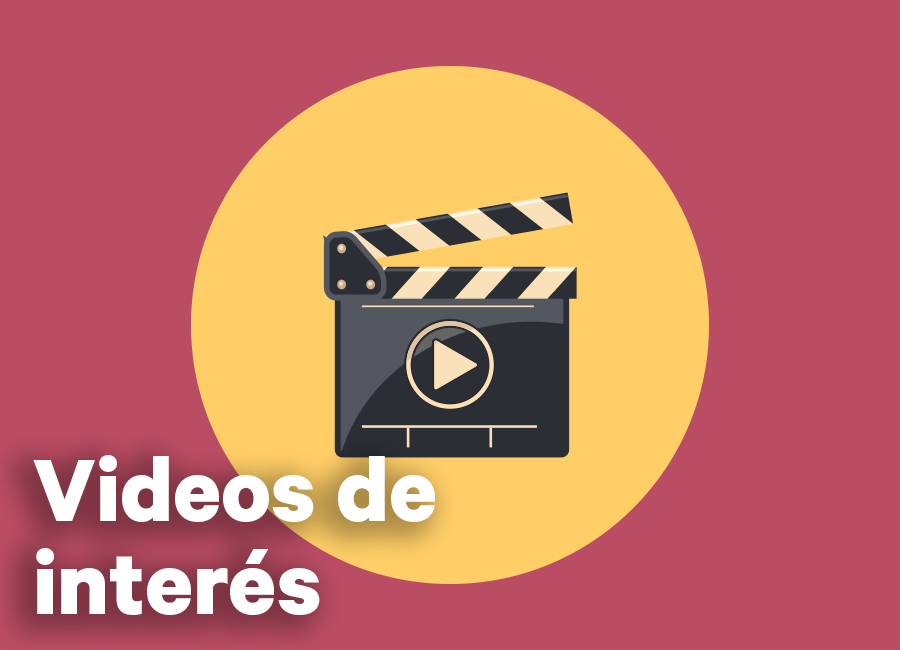
<style>
.page{position:relative;width:900px;height:650px;background:#ba4c63}
.page>*{position:absolute;margin:0}
.t1{font:100px/93px "Calibre-Bold";color:#ffffff}
</style>
<div class="page">
<p class="t1" style="left:33px;top:455px;width:402px;height:160px">Videos de <br>interés</p>
</div>
